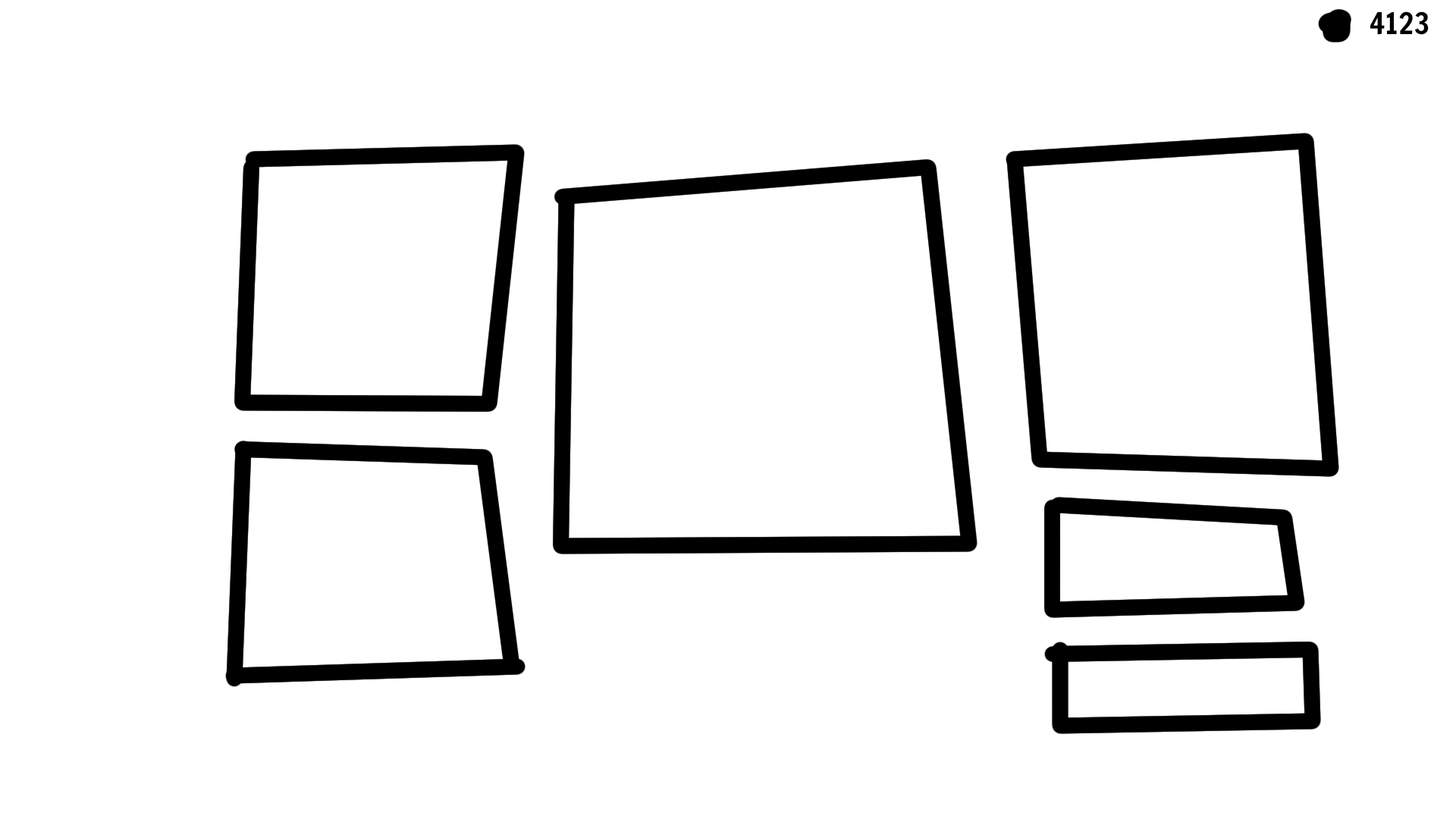
<style>
.page{position:relative;width:1456px;height:819px;background:#ffffff}
.page>*{position:absolute;margin:0}
.t1{font:29.2px "FrancoisOne-Regular";letter-spacing:0.014em;color:#000000}
</style>
<div class="page">
<p class="t1" style="left:1370px;top:11px;width:59px;height:24px">4123</p>
</div>
